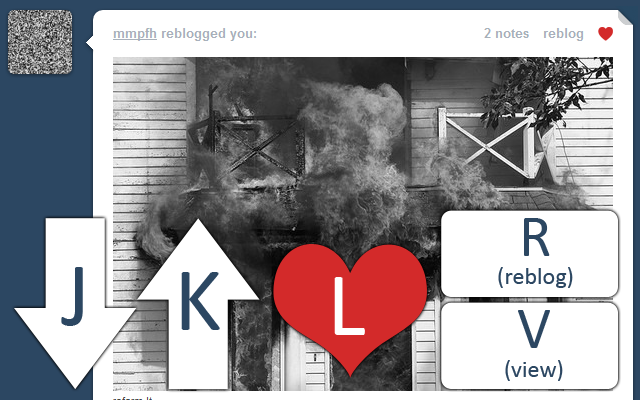
<style>
.page{position:relative;width:640px;height:400px;background:#ffffff}
.page>*{position:absolute;margin:0}
.t1{font:24px "Calibri";color:#2c4762}
.t2{font:60px "Calibri";color:#2c4762}
.t3{font:92px "Calibri";color:#2c4762}
.t4{font:92px "Calibri";color:#ffffff}
</style>
<div class="page">
<p class="t1" style="left:498px;top:218px;width:75px;height:70px;text-align:center"><span class="t2">R<br></span>(reblog)</p>
<p class="t3" style="left:61px;top:267px;width:22px;height:59px">J</p>
<p class="t3" style="left:181px;top:272px;width:39px;height:58px">K</p>
<p class="t4" style="left:334px;top:277px;width:31px;height:58px">L</p>
<p class="t1" style="left:505px;top:310px;width:58px;height:71px;text-align:center"><span class="t2">V<br></span>(view)</p>
</div>
